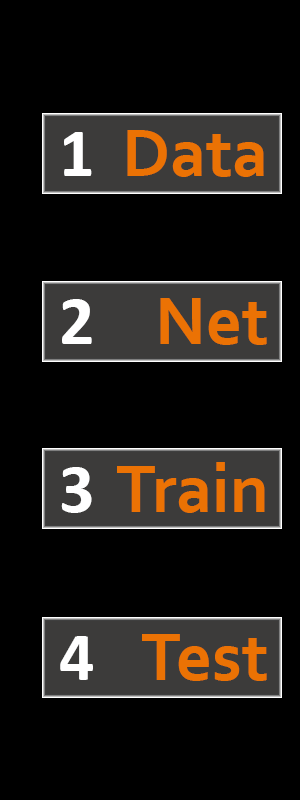
<style>
.page{position:relative;width:300px;height:800px;background:#000000}
.page>*{position:absolute;margin:0}
.t1{font:70px "Calibri-Bold";color:#ffffff}
.t2{font:70px "Corbel-Bold";color:#ec7204}
</style>
<div class="page">
<p class="t1" style="left:60px;top:132px;width:33px;height:548px">1<br><br>2<br><br>3<br><br>4</p>
<p class="t2" style="left:117px;top:130px;width:150px;height:551px">Data<br><br>Net<br><br>Train<br><br>Test</p>
</div>
